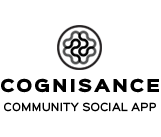
<style>
.page{position:relative;width:161px;height:137px;background:#ffffff}
.page>*{position:absolute;margin:0}
.t1{font:16.1px "SinkinSans-900XBlack";letter-spacing:0.1em;color:#000000}
.t2{font:10px "SinkinSans-500Medium";letter-spacing:0.025em;color:#000000;text-transform:uppercase}
</style>
<div class="page">
<p class="t1" style="left:1px;top:78px;width:158px;height:15px">COGNISANCE</p>
<p class="t2" style="left:4px;top:102px;width:152px;height:10px">community social app</p>
</div>
